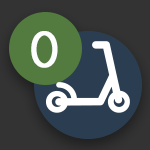
<style>
.page{position:relative;width:150px;height:150px;background:#333333}
.page>*{position:absolute;margin:0}
.t1{font:51.7px "FuturaPT-Book";letter-spacing:0.04em;color:#fefefe;font-weight:bold}
</style>
<div class="page">
<p class="t1" style="left:31px;top:31px;width:27px;height:37px">0</p>
</div>
